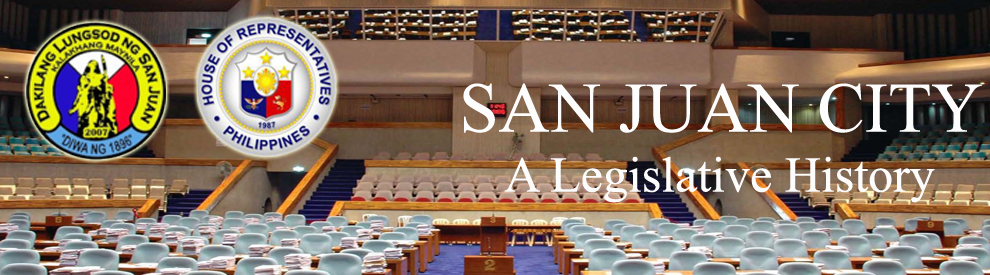
<style>
.page{position:relative;width:990px;height:275px}
.page>*{position:absolute;margin:0}
.t1{font:50px "TimesNewRomanPSMT";color:#fdfcfc}
.t2{font:70.8px "TimesNewRomanPSMT";color:#fdfdfd}
</style>
<div class="page">
<p class="t1" style="left:463px;top:83px;width:519px;height:120px;text-align:center"><span class="t2">SAN JUAN CITY<br></span>A Legislative History</p>
</div>
